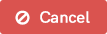
<style>
.page{position:relative;width:107px;height:34px;background:#da534f}
.page>*{position:absolute;margin:0}
.t1{font:16px "HKGrotesk-Medium";color:#ffffff;font-weight:bold}
</style>
<div class="page">
<p class="t1" style="left:40px;top:11px;width:50px;height:12px">Cancel</p>
</div>
